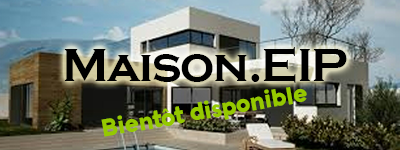
<style>
.page{position:relative;width:400px;height:150px}
.page>*{position:absolute;margin:0}
.t1{font:48px "CopperplateGothic-Bold";letter-spacing:-0.025em;color:#000000}
.t2{font:24px "Aquawax-Black";letter-spacing:-0.025em;color:#95c900}
</style>
<div class="page">
<p class="t1" style="left:64px;top:47px;width:283px;height:36px">Maison.EIP</p>
<p class="t2" style="left:101px;top:87px;width:206px;height:50px;rotate:-10deg">Bientôt disponible</p>
</div>
